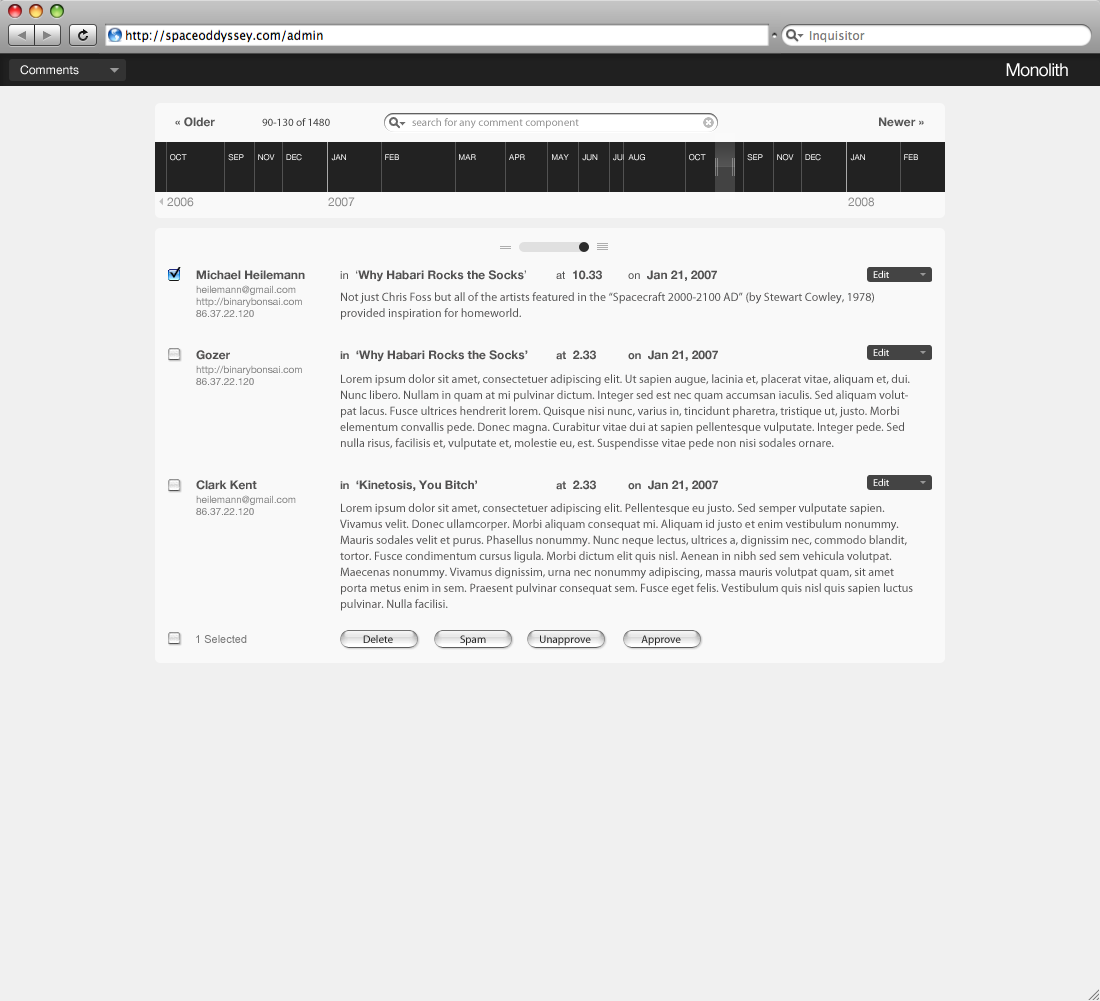
<style>
.page{position:relative;width:1100px;height:1001px;background:#f0f0f0}
.page>*{position:absolute;margin:0}
.t1{font:12px "HelveticaNeue";color:#ffffff}
.t2{font:18px "HelveticaNeue";letter-spacing:-0.05em;color:#ffffff}
.t3{font:12px "HelveticaNeue-Bold";color:#444444}
.t4{font:11px "MyriadPro-Regular";color:#444444}
.t5{font:11px "MyriadPro-Regular";color:#949494}
.t6{font:12px "HelveticaNeue";color:#898989}
.t7{font:12px "HelveticaNeue-Bold";color:#525151}
.t8{font:11px "HelveticaNeue";color:#525151}
.t9{font:12px "HelveticaNeue";color:#525151}
.t10{font:10px "MyriadPro-Regular";color:#ffffff}
.t11{font:10px "HelveticaNeue";color:#7f7f7f}
.t12{font:12px/16px "MyriadPro-Regular";color:#525151}
.t13{font:11px "HelveticaNeue-Bold";color:#525151}
.t14{font:11px "ArialMT";color:#797979}
.t15{font:11px "MyriadPro-Regular";color:#242424}
</style>
<div class="page">
<p class="t1" style="left:20px;top:65px;width:59px;height:10px">Comments</p>
<p class="t2" style="left:1006px;top:63px;width:62px;height:14px">Monolith</p>
<p class="t3" style="left:175px;top:117px;width:40px;height:10px;opacity:0.9">« Older</p>
<p class="t4" style="left:262px;top:118px;width:68px;height:8px">90-130 of 1480</p>
<p class="t5" style="left:412px;top:118px;width:167px;height:11px">search for any comment component</p>
<p class="t3" style="left:879px;top:117px;width:45px;height:10px;opacity:0.9">Newer »</p>
<p class="t6" style="left:167px;top:197px;width:27px;height:10px">2006</p>
<p class="t6" style="left:328px;top:197px;width:27px;height:10px">2007</p>
<p class="t6" style="left:848px;top:197px;width:26px;height:10px">2008</p>
<p class="t7" style="left:196px;top:270px;width:521px;height:12px">Michael Heilemann <span class="t8">in </span><span class="t9"> ‘</span>Why Habari Rocks the Socks<span class="t9">’ </span><span class="t8">at  </span>10.33   <span class="t8">on  </span>Jan 21, 2007</p>
<p class="t10" style="left:873px;top:270px;width:16px;height:8px">Edit</p>
<p class="t11" style="left:196px;top:285px;width:106px;height:32px">heilemann@gmail.com<br>http://binarybonsai.com<br>86.37.22.120</p>
<p class="t12" style="left:341px;top:292px;width:533px;height:28px">Not just Chris Foss but all of the artists featured in the “Spacecraft 2000-2100 AD” (by Stewart Cowley, 1978) provided inspiration for homeworld.</p>
<p class="t7" style="left:196px;top:350px;width:522px;height:12px">Gozer    <span class="t13">in </span> ‘Why Habari Rocks the Socks’ <span class="t13">at</span>  2.33   <span class="t13">on </span> Jan 21, 2007</p>
<p class="t10" style="left:873px;top:348px;width:16px;height:8px">Edit</p>
<p class="t11" style="left:196px;top:365px;width:106px;height:20px">http://binarybonsai.com<br>86.37.22.120</p>
<p class="t12" style="left:340px;top:374px;width:570px;height:76px">Lorem ipsum dolor sit amet, consectetuer adipiscing elit. Ut sapien augue, lacinia et, placerat vitae, aliquam et, dui. Nunc libero. Nullam in quam at mi pulvinar dictum. Integer sed est nec quam accumsan iaculis. Sed aliquam volutpat lacus. Fusce ultrices hendrerit lorem. Quisque nisi nunc, varius in, tincidunt pharetra, tristique ut, justo. Morbi elementum convallis pede. Donec magna. Curabitur vitae dui at sapien pellentesque vulputate. Integer pede. Sed nulla risus, facilisis et, vulputate et, molestie eu, est. Suspendisse vitae pede non nisi sodales ornare.</p>
<p class="t7" style="left:196px;top:480px;width:522px;height:11px">Clark Kent   <span class="t13">in </span> ‘Kinetosis, You Bitch’   <span class="t13">at</span>  2.33   <span class="t13">on </span> Jan 21, 2007</p>
<p class="t10" style="left:873px;top:478px;width:16px;height:8px">Edit</p>
<p class="t11" style="left:196px;top:495px;width:100px;height:20px">heilemann@gmail.com<br>86.37.22.120</p>
<p class="t12" style="left:340px;top:503px;width:573px;height:108px">Lorem ipsum dolor sit amet, consectetuer adipiscing elit. Pellentesque eu justo. Sed semper vulputate sapien. Vivamus velit. Donec ullamcorper. Morbi aliquam consequat mi. Aliquam id justo et enim vestibulum nonummy. Mauris sodales velit et purus. Phasellus nonummy. Nunc neque lectus, ultrices a, dignissim nec, commodo blandit, tortor. Fusce condimentum cursus ligula. Morbi dictum elit quis nisl. Aenean in nibh sed sem vehicula volutpat. Maecenas nonummy. Vivamus dignissim, urna nec nonummy adipiscing, massa mauris volutpat quam, sit amet porta metus enim in sem. Praesent pulvinar consequat sem. Fusce eget felis. Vestibulum quis nisl quis sapien luctus pulvinar. Nulla facilisi.<br><br>Donec sit amet tortor nec sapien faucibus accumsan. Proin a ipsum nec ligula aliquam tincidunt. Aenean vel metus. Donec dictum vestibulum enim. Nam a elit eget nisl aliquet ullamcorper.</p>
<p class="t14" style="left:196px;top:635px;width:51px;height:8px">1 Selected</p>
<p class="t15" style="left:363px;top:635px;width:30px;height:8px">Delete</p>
<p class="t15" style="left:460px;top:635px;width:26px;height:11px">Spam</p>
<p class="t15" style="left:540px;top:635px;width:51px;height:11px">Unapprove</p>
<p class="t15" style="left:641px;top:635px;width:40px;height:11px">Approve</p>
</div>
